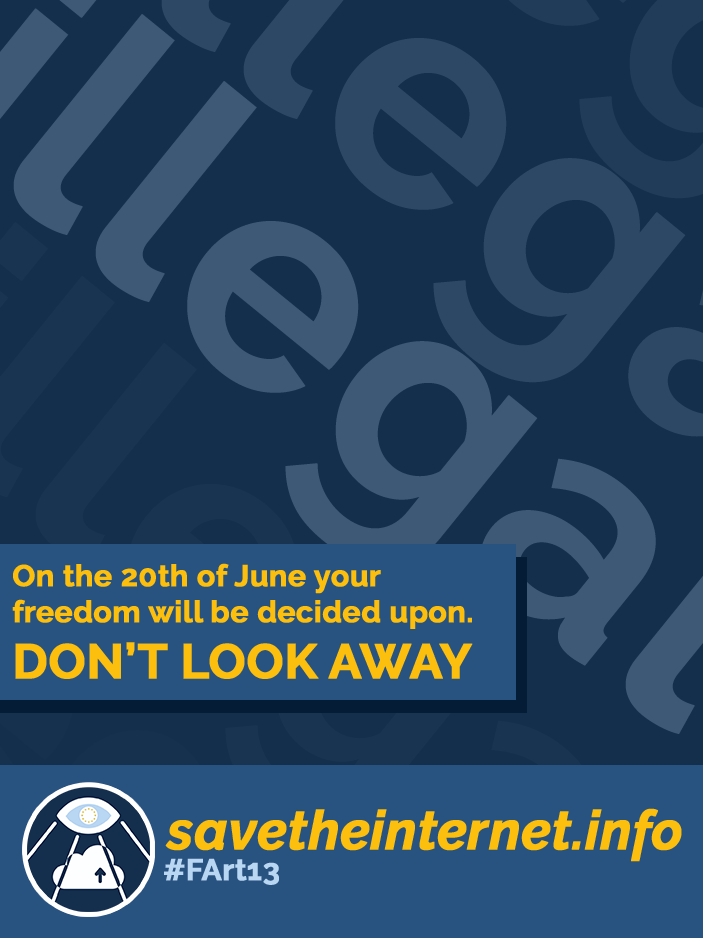
<style>
.page{position:relative;width:703px;height:938px;background:#142f4c}
.page>*{position:absolute;margin:0}
.t1{font:30px "Raleway-Bold";color:#fcbf0e;font-weight:bold}
.t2{font:48.6px "Raleway-Bold";color:#fcbf0e;font-weight:bold}
.t3{font:54.5px "Raleway-BoldItalic";color:#fcbf0e;font-weight:bold;scale:0.96 1}
.t4{font:30px "Raleway-Bold";color:#b9d6f2;font-weight:bold}
</style>
<div class="page">
<p class="t1" style="left:12px;top:563px;width:460px;height:66px">On the 20th of June your <br>freedom will be decided upon.</p>
<p class="t2" style="left:15px;top:642px;width:458px;height:37px">DON’T LOOK AWAY</p>
<p class="t3" style="left:165px;top:808px;width:517px;height:54px">savetheinternet.info</p>
<p class="t4" style="left:164px;top:858px;width:115px;height:27px">#FArt13</p>
</div>
